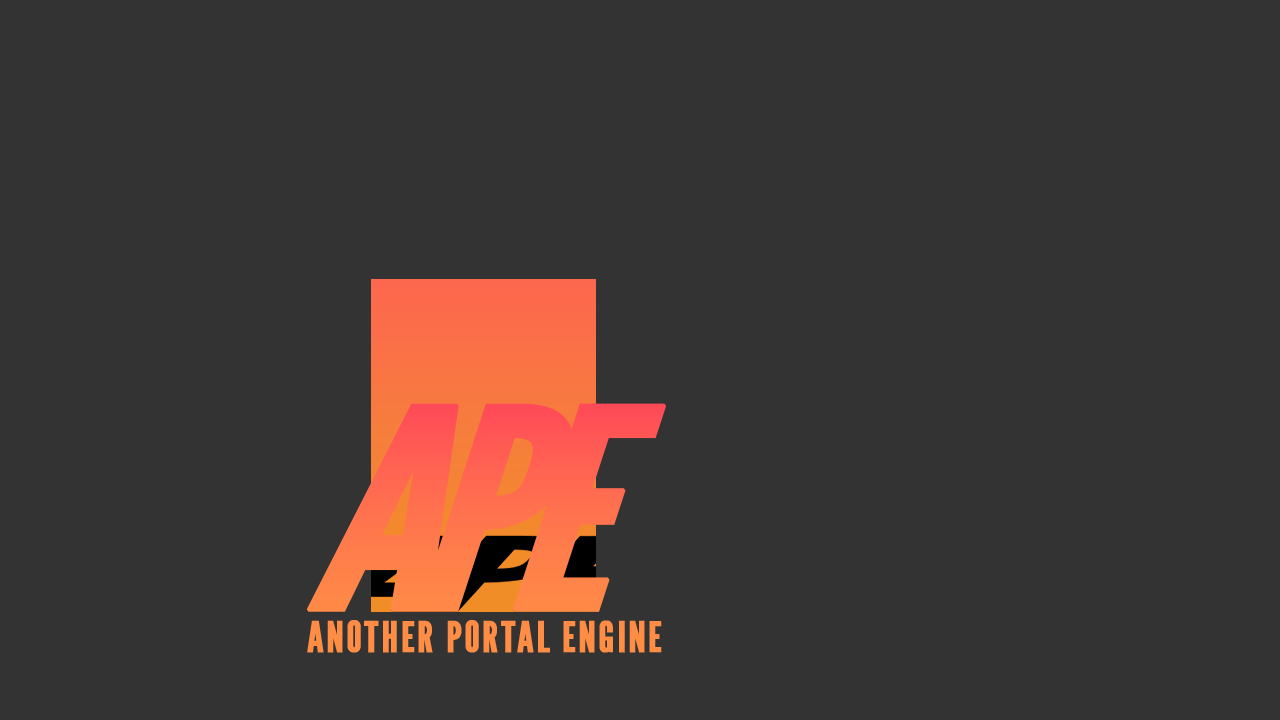
<style>
.page{position:relative;width:1280px;height:720px;background:#333333}
.page>*{position:absolute;margin:0}
.t1{font:292.5px "LeagueGothic-Regular";letter-spacing:-0.1em;font-weight:bold;scale:1.15 1}
.t2{font:42.6px "LeagueGothic-Regular";letter-spacing:0.05em;color:#ff8d45;text-transform:uppercase;font-weight:bold}
</style>
<div class="page">
<p class="t1" style="left:306px;top:403px;width:361px;height:209px">APE</p>
<p class="t2" style="left:307px;top:620px;width:355px;height:33px">Another Portal Engine</p>
</div>
